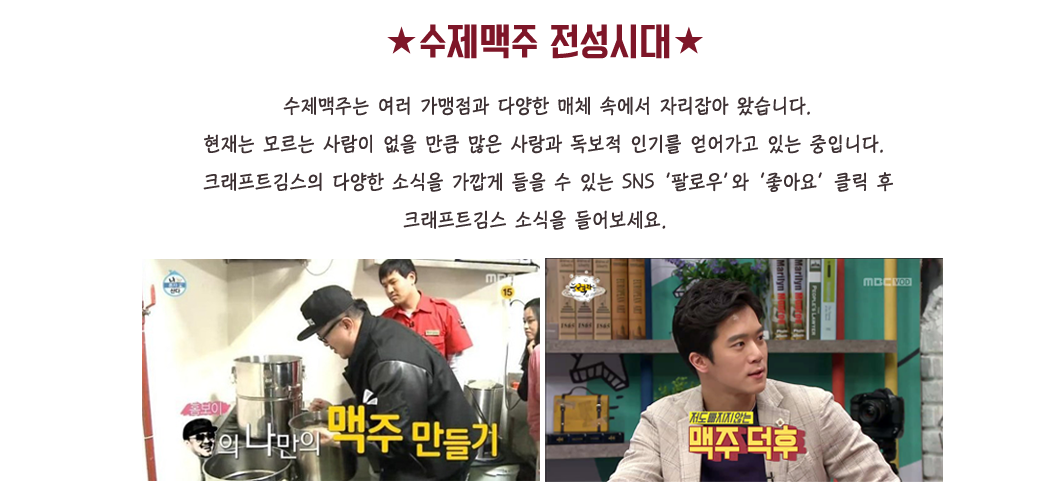
<style>
.page{position:relative;width:1046px;height:490px;background:#ffffff}
.page>*{position:absolute;margin:0}
.t1{font:35px "KoreanYNMYT-M";color:#7e1628}
.t2{font:20px/38px "KoreanCNM-L";color:#3d3133}
</style>
<div class="page">
<p class="t1" style="left:387px;top:24px;width:316px;height:35px">★수제맥주 전성시대★</p>
<p class="t2" style="left:203px;top:96px;width:690px;height:134px">수제맥주는 여러 가맹점과 다양한 매체 속에서 자리잡아 왔습니다.<br>현재는 모르는 사람이 없을 만큼 많은 사랑과 독보적 인기를 얻어가고 있는 중입니다.<br>크래프트김스의 다양한 소식을 가깝게 들을 수 있는 SNS ‘팔로우’와 ‘좋아요’ 클릭 후<br>                         크래프트김스 소식을 들어보세요.</p>
</div>
